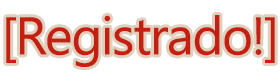
<style>
.page{position:relative;width:280px;height:80px;background:#ffffff}
.page>*{position:absolute;margin:0}
.t1{font:53px "YuGothicUI-Regular";letter-spacing:-0.01em;color:#c51f12}
</style>
<div class="page">
<p class="t1" style="left:6px;top:15px;width:269px;height:52px">[Registrado!]</p>
</div>
